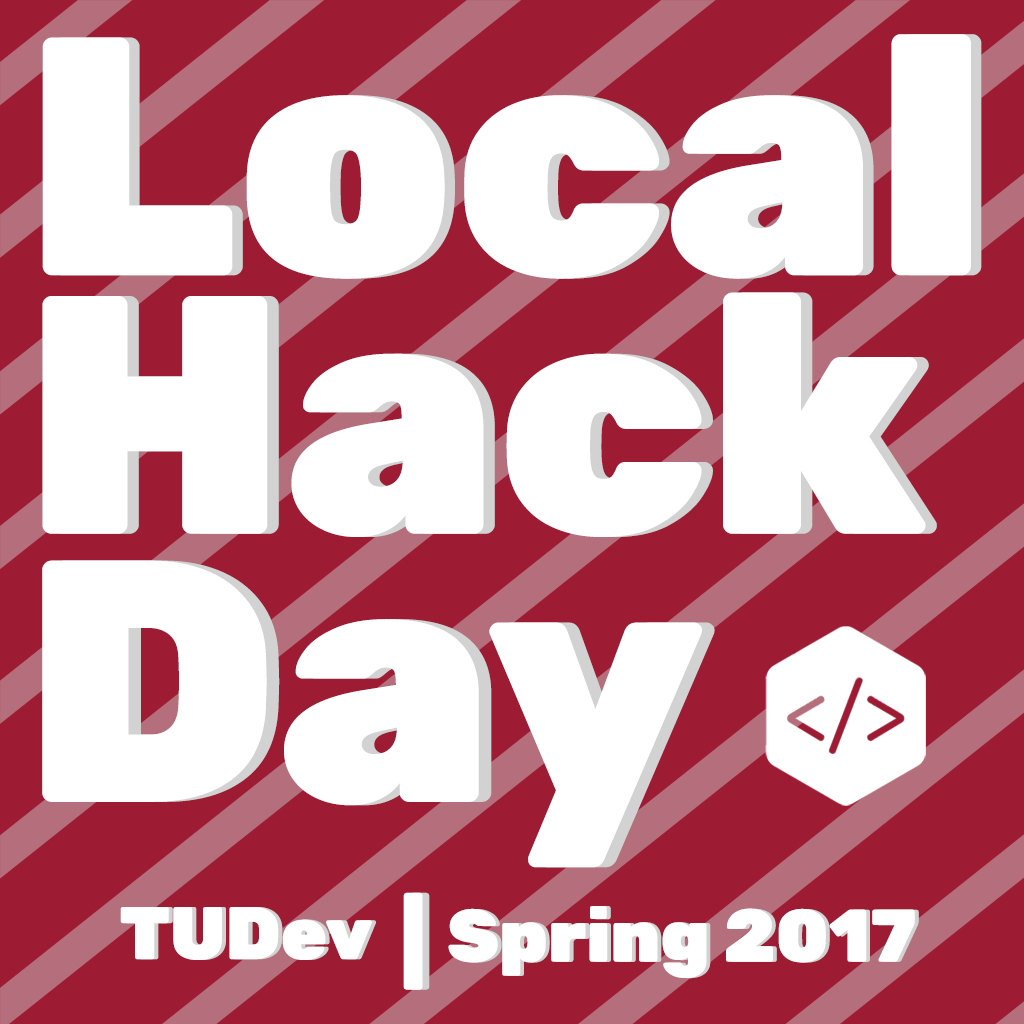
<style>
.page{position:relative;width:1024px;height:1024px;background:#9e1b34}
.page>*{position:absolute;margin:0}
.t1{font:339.3px "Rubik-Black";color:#ffffff}
.t2{font:344.4px "Rubik-Black";color:#ffffff}
.t3{font:87.5px "Rubik-Black";color:#ffffff;scale:1.13 1}
.t4{font:87.5px "Rubik-Black";scale:1.13 1}
.t5{font:74.6px "Rubik-Black";color:#ffffff}
.t6{font:74.2px "Rubik-Black";color:#ffffff}
</style>
<div class="page">
<p class="t1" style="left:42px;top:34px;width:929px;height:245px">Local</p>
<p class="t1" style="left:53px;top:34px;width:929px;height:245px">Local</p>
<p class="t1" style="left:42px;top:292px;width:884px;height:245px">Hack</p>
<p class="t1" style="left:53px;top:292px;width:884px;height:245px">Hack</p>
<p class="t2" style="left:42px;top:560px;width:660px;height:308px">Day</p>
<p class="t2" style="left:54px;top:560px;width:661px;height:308px">Day</p>
<p class="t3" style="left:403px;top:892px;width:20px;height:98px">|</p>
<p class="t4" style="left:410px;top:892px;width:20px;height:98px">|</p>
<p class="t5" style="left:120px;top:907px;width:252px;height:53px">TUDev</p>
<p class="t5" style="left:124px;top:907px;width:252px;height:53px">TUDev</p>
<p class="t6" style="left:448px;top:906px;width:467px;height:72px">Spring 2017</p>
<p class="t6" style="left:452px;top:906px;width:467px;height:73px">Spring 2017</p>
</div>
